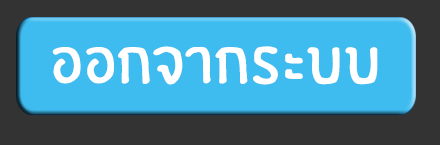
<style>
.page{position:relative;width:440px;height:145px;background:#3fbcef}
.page>*{position:absolute;margin:0}
.t1{font:72px "Arabica";color:#ffffff}
</style>
<div class="page">
<p class="t1" style="left:52px;top:46px;width:326px;height:39px">ออกจากระบบ</p>
</div>
